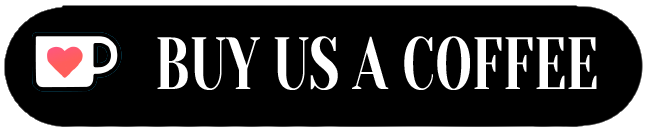
<style>
.page{position:relative;width:649px;height:131px;background:#000000}
.page>*{position:absolute;margin:0}
.t1{font:73.7px "YesevaOne";color:#ffffff;scale:0.68 1}
</style>
<div class="page">
<p class="t1" style="left:157px;top:36px;width:440px;height:54px">BUY US A COFFEE</p>
</div>
